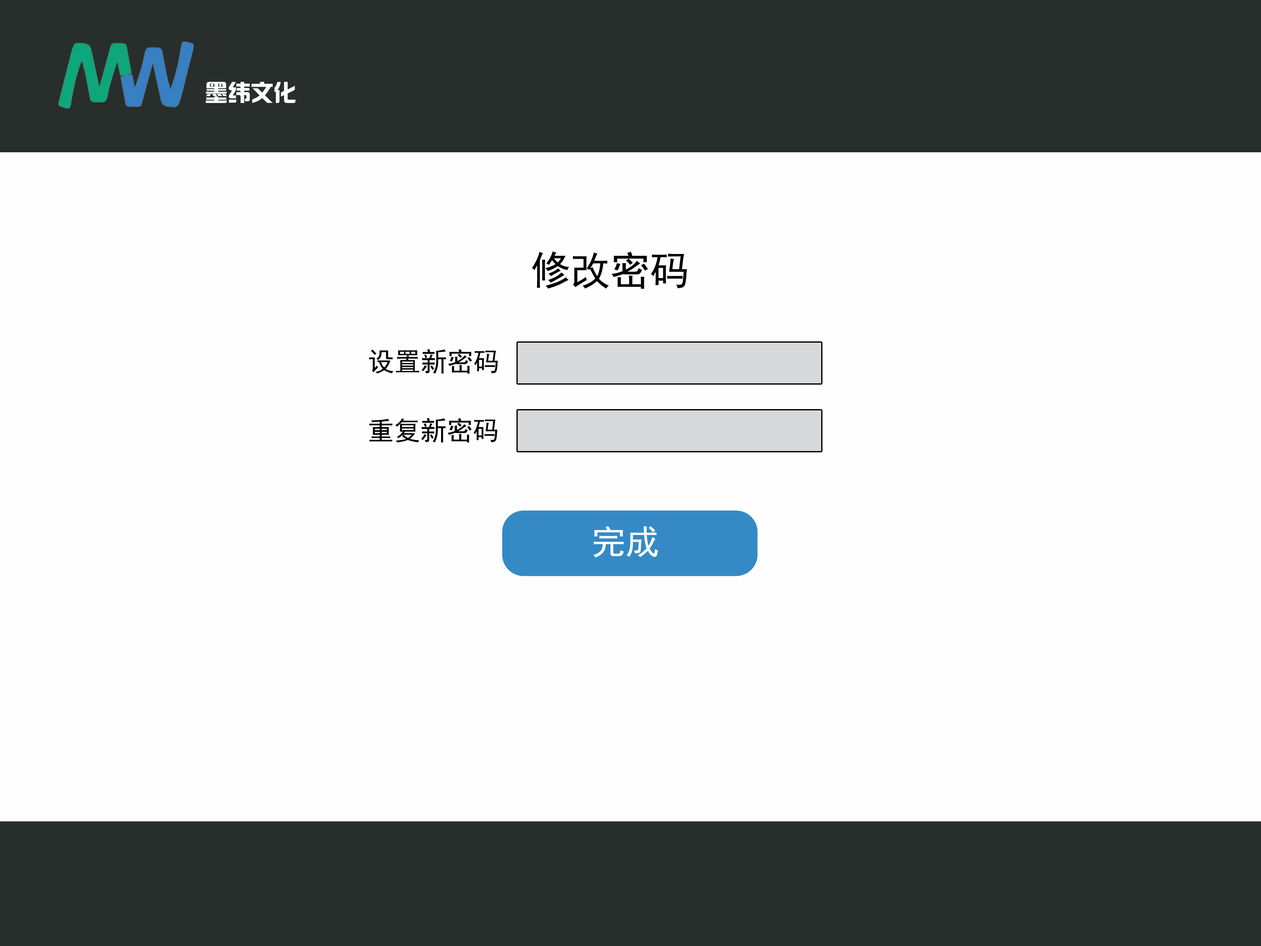
<style>
.page{position:relative;width:1261px;height:946px;background:#fefefe}
.page>*{position:absolute;margin:0}
.t1{font:22.9px "¹ã½Ý¾ÓÃÔÄã×Ö¿â";color:#fdfdfd}
.t2{font:39.7px "SimHei";color:#000000}
.t3{font:26.3px "SimHei";color:#000000}
.t4{font:33.6px "SimHei";color:#fefefe}
</style>
<div class="page">
<p class="t1" style="left:206px;top:82px;width:90px;height:21px">墨纬文化</p>
<p class="t2" style="left:532px;top:251px;width:155px;height:38px">修改密码</p>
<p class="t3" style="left:369px;top:349px;width:129px;height:25px">设置新密码</p>
<p class="t3" style="left:369px;top:418px;width:128px;height:24px">重复新密码</p>
<p class="t4" style="left:593px;top:526px;width:65px;height:31px">完成</p>
</div>
